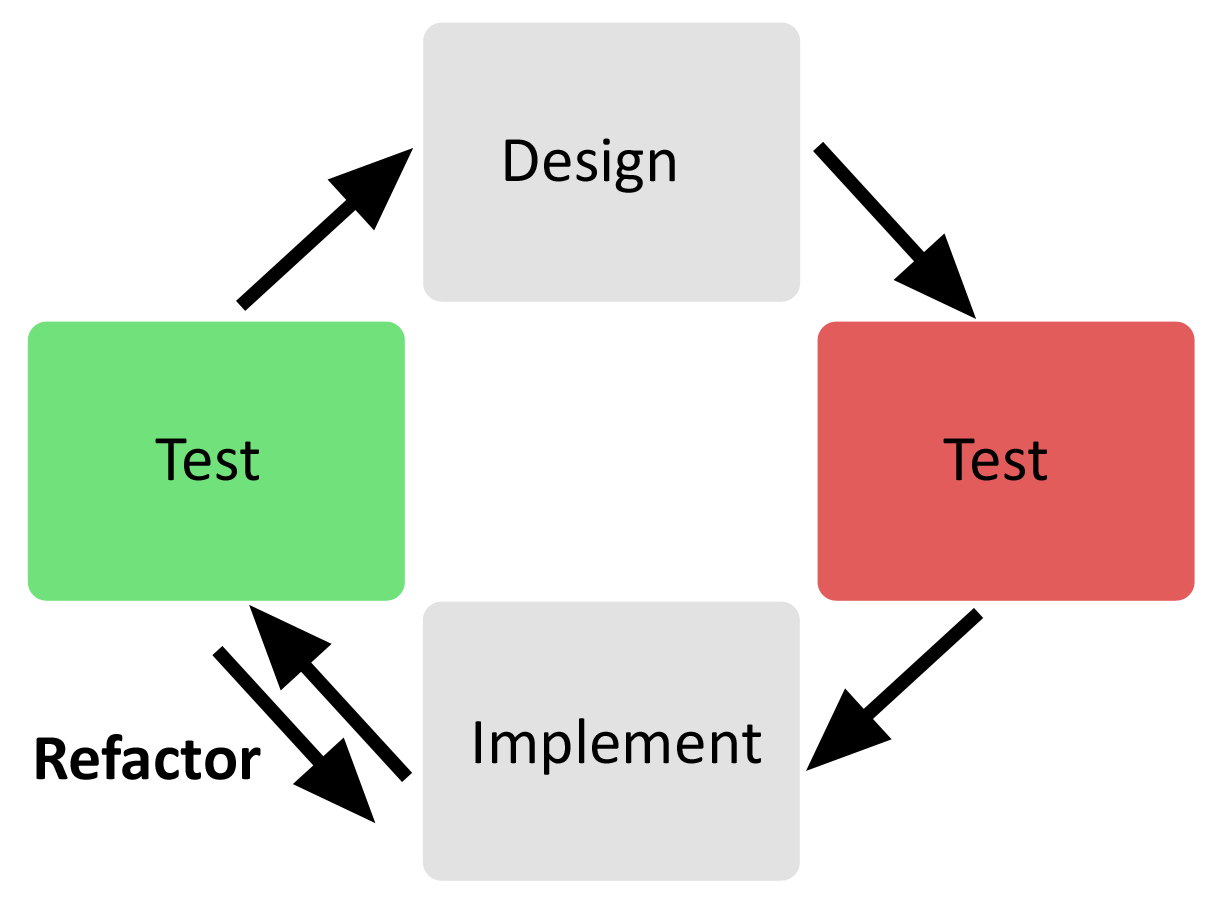
<style>
.page{position:relative;width:1220px;height:908px;background:#ffffff}
.page>*{position:absolute;margin:0}
.t1{font:65.8px "Calibri";color:#000000}
.t2{font:65.8px "Calibri-Bold";color:#000000}
</style>
<div class="page">
<p class="t1" style="left:505px;top:138px;width:170px;height:55px">Design</p>
<p class="t1" style="left:155px;top:438px;width:104px;height:43px">Test</p>
<p class="t1" style="left:943px;top:438px;width:104px;height:43px">Test</p>
<p class="t1" style="left:475px;top:718px;width:286px;height:57px">Implement</p>
<p class="t2" style="left:36px;top:734px;width:225px;height:46px">Refactor</p>
</div>
